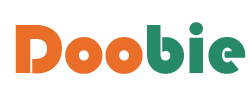
<style>
.page{position:relative;width:250px;height:100px;background:#ffffff}
.page>*{position:absolute;margin:0}
.t1{font:72px "Bauhaus93";color:#ea6e27}
.t2{font:72px "Bauhaus93";color:#268968}
</style>
<div class="page">
<p class="t1" style="left:15px;top:22px;width:231px;height:52px">Doo<span class="t2">bie</span></p>
</div>
